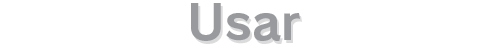
<style>
.page{position:relative;width:490px;height:50px;background:#ffffff}
.page>*{position:absolute;margin:0}
.t1{font:48px "RodinPro-B";color:#989a9d}
</style>
<div class="page">
<p class="t1" style="left:191px;top:3px;width:109px;height:38px">Usar</p>
</div>
